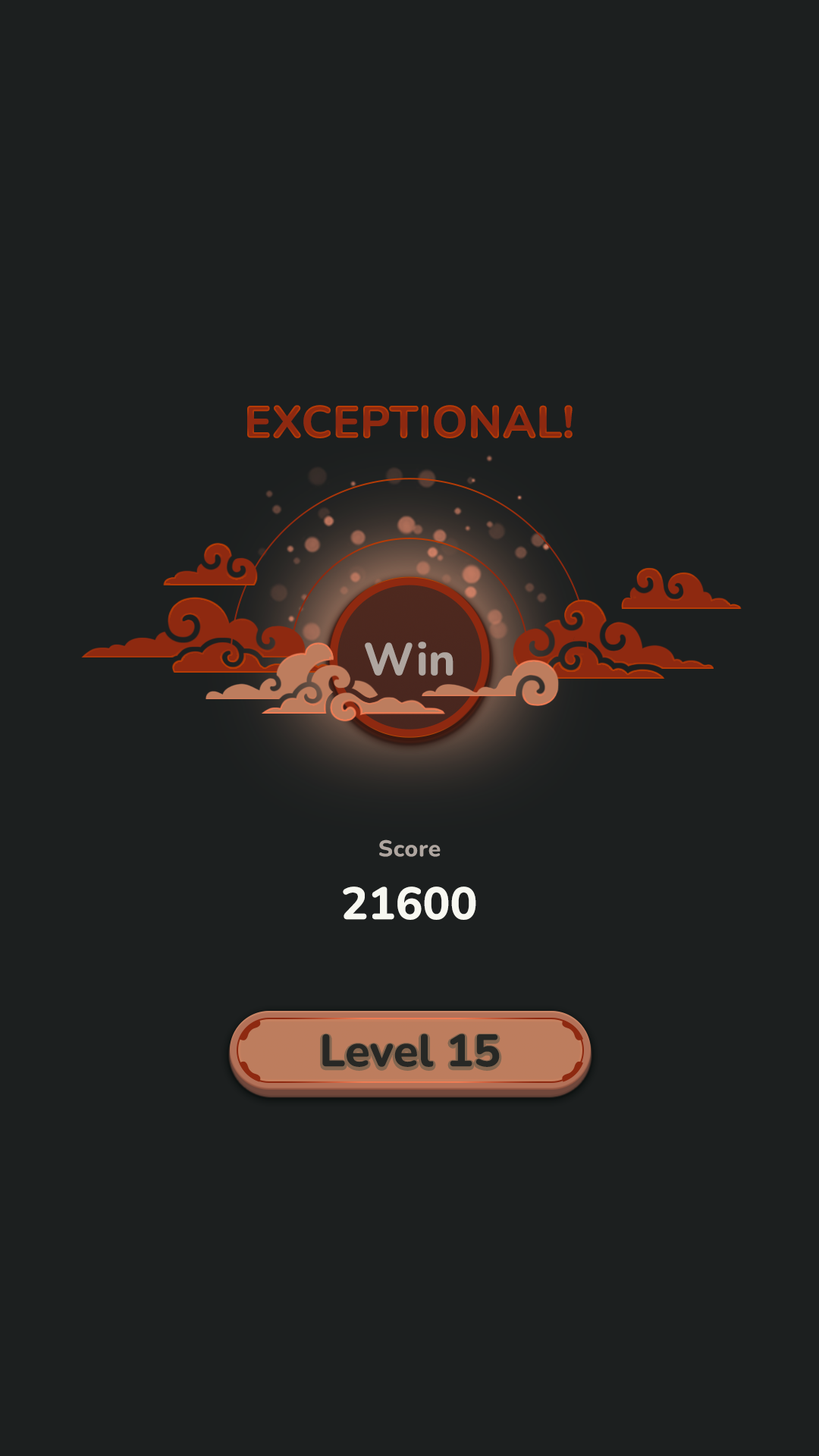
<style>
.page{position:relative;width:819px;height:1456px;background:#1c1f1f}
.page>*{position:absolute;margin:0}
.t1{font:45.5px "Nunito-ExtraBold";color:#984123;text-transform:uppercase}
.t2{font:45.5px "Nunito-ExtraBold";color:#afa6a0}
.t3{font:22.7px "Nunito-ExtraBold";letter-spacing:0.025em;color:#afa6a0}
.t4{font:45.5px "Nunito-ExtraBold";color:#f7f8f1}
.t5{font:45.5px "Nunito-ExtraBold";color:#272825}
</style>
<div class="page">
<p class="t1" style="left:247px;top:405px;width:326px;height:33px">Exceptional!</p>
<p class="t2" style="left:365px;top:642px;width:88px;height:34px">Win</p>
<p class="t3" style="left:379px;top:839px;width:62px;height:18px">Score</p>
<p class="t4" style="left:343px;top:886px;width:133px;height:34px">21600</p>
<p class="t5" style="left:322px;top:1034px;width:178px;height:33px">Level 15</p>
</div>
